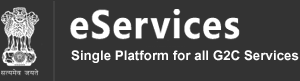
<style>
.page{position:relative;width:300px;height:81px;background:#333333}
.page>*{position:absolute;margin:0}
.t1{font:18.7px "Utsaah-Bold";color:#fefefe}
</style>
<div class="page">
<p class="t1" style="left:71px;top:50px;width:228px;height:13px">Single Platform for all G2C Services</p>
</div>
